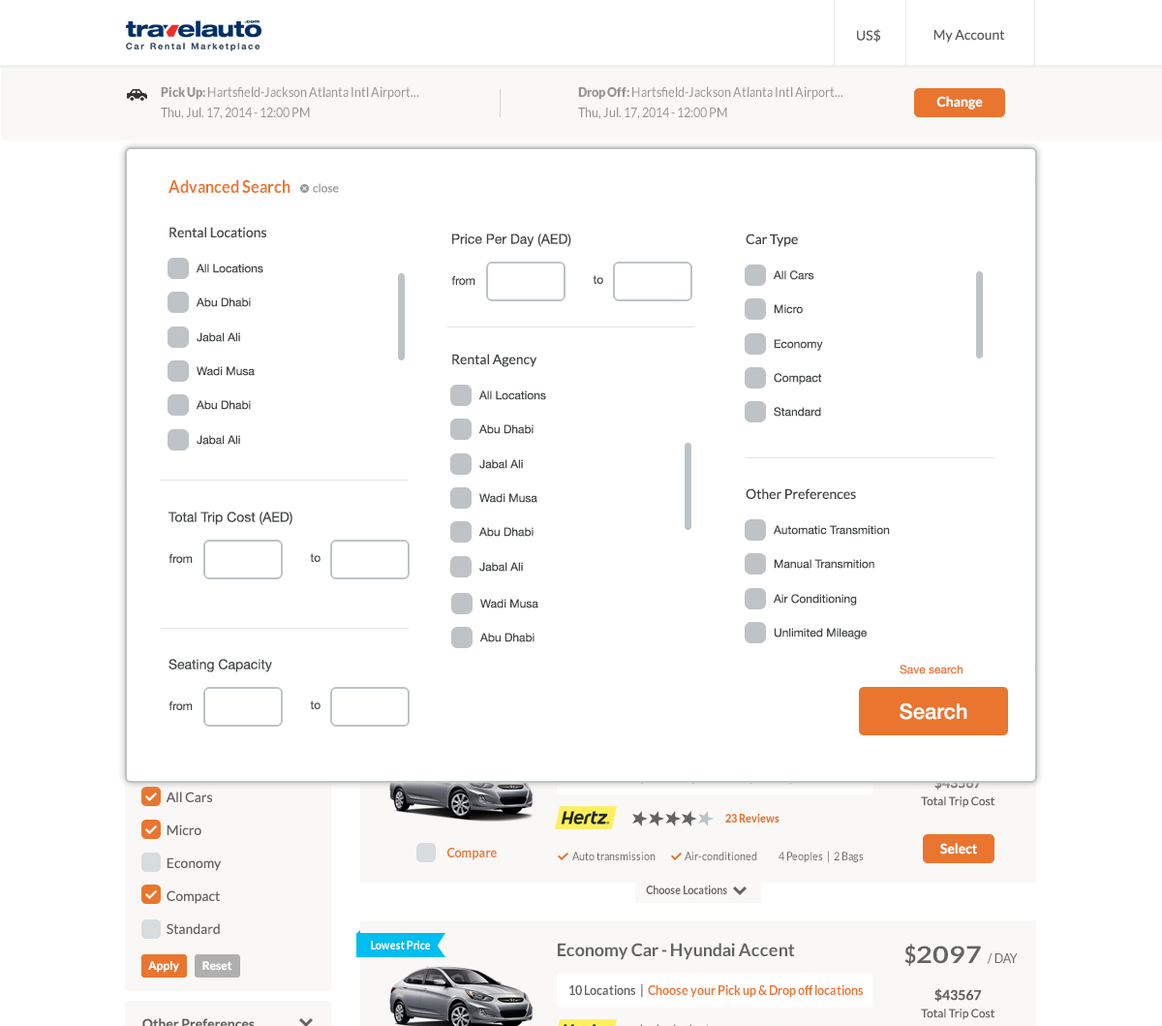
<style>
.page{position:relative;width:1162px;height:1026px;background:#ffffff}
.page>*{position:absolute;margin:0}
.t1{font:17.4px "Lato-Bold";color:#e9752f;scale:0.9 1}
.t2{font:11.6px "Lato-Regular";color:#959898}
.t3{font:13.6px "Lato-Regular";color:#414545}
.t4{font:13.6px "HelveticaNeue";color:#414545}
.t5{font:11.6px "HelveticaNeue";color:#414545}
.t6{font:11.6px "HelveticaNeue";color:#e9752f}
.t7{font:21.3px "HelveticaNeue-Medium";color:#ffffff}
</style>
<div class="page">
<p class="t1" style="left:169px;top:179px;width:122px;height:15px">Advanced Search</p>
<p class="t2" style="left:313px;top:183px;width:26px;height:10px">close</p>
<p class="t3" style="left:170px;top:227px;width:96px;height:11px">Rental Locations</p>
<p class="t4" style="left:452px;top:233px;width:120px;height:14px">Price Per Day (AED)</p>
<p class="t3" style="left:746px;top:233px;width:52px;height:14px">Car Type</p>
<p class="t5" style="left:196px;top:263px;width:67px;height:10px">All Locations</p>
<p class="t5" style="left:451px;top:276px;width:25px;height:9px">from</p>
<p class="t5" style="left:593px;top:275px;width:10px;height:9px">to</p>
<p class="t5" style="left:773px;top:270px;width:42px;height:10px">All Cars</p>
<p class="t5" style="left:196px;top:297px;width:55px;height:10px">Abu Dhabi</p>
<p class="t5" style="left:774px;top:304px;width:29px;height:10px">Micro</p>
<p class="t5" style="left:197px;top:332px;width:43px;height:10px">Jabal Ali</p>
<p class="t5" style="left:774px;top:339px;width:49px;height:12px">Economy</p>
<p class="t3" style="left:452px;top:354px;width:86px;height:13px">Rental Agency</p>
<p class="t5" style="left:197px;top:366px;width:58px;height:10px">Wadi Musa</p>
<p class="t5" style="left:774px;top:373px;width:48px;height:12px">Compact</p>
<p class="t5" style="left:196px;top:400px;width:55px;height:10px">Abu Dhabi</p>
<p class="t5" style="left:479px;top:390px;width:67px;height:10px">All Locations</p>
<p class="t5" style="left:774px;top:407px;width:47px;height:10px">Standard</p>
<p class="t5" style="left:479px;top:424px;width:55px;height:10px">Abu Dhabi</p>
<p class="t5" style="left:197px;top:435px;width:43px;height:10px">Jabal Ali</p>
<p class="t5" style="left:479px;top:459px;width:44px;height:10px">Jabal Ali</p>
<p class="t5" style="left:479px;top:493px;width:59px;height:10px">Wadi Musa</p>
<p class="t3" style="left:746px;top:488px;width:110px;height:12px">Other Preferences</p>
<p class="t4" style="left:169px;top:511px;width:124px;height:14px">Total Trip Cost (AED)</p>
<p class="t5" style="left:479px;top:527px;width:55px;height:10px">Abu Dhabi</p>
<p class="t5" style="left:773px;top:525px;width:117px;height:10px">Automatic Transmition</p>
<p class="t5" style="left:169px;top:554px;width:24px;height:9px">from</p>
<p class="t5" style="left:310px;top:553px;width:11px;height:9px">to</p>
<p class="t5" style="left:479px;top:562px;width:44px;height:10px">Jabal Ali</p>
<p class="t5" style="left:774px;top:559px;width:101px;height:10px">Manual Transmition</p>
<p class="t5" style="left:773px;top:594px;width:84px;height:11px">Air Conditioning</p>
<p class="t5" style="left:480px;top:599px;width:59px;height:9px">Wadi Musa</p>
<p class="t5" style="left:774px;top:628px;width:93px;height:11px">Unlimited Mileage</p>
<p class="t5" style="left:479px;top:633px;width:56px;height:9px">Abu Dhabi</p>
<p class="t4" style="left:169px;top:659px;width:103px;height:13px">Seating Capacity</p>
<p class="t6" style="left:900px;top:665px;width:64px;height:9px">Save search</p>
<p class="t5" style="left:169px;top:701px;width:24px;height:9px">from</p>
<p class="t5" style="left:310px;top:700px;width:11px;height:9px">to</p>
<p class="t7" style="left:900px;top:702px;width:68px;height:18px">Search</p>
</div>
